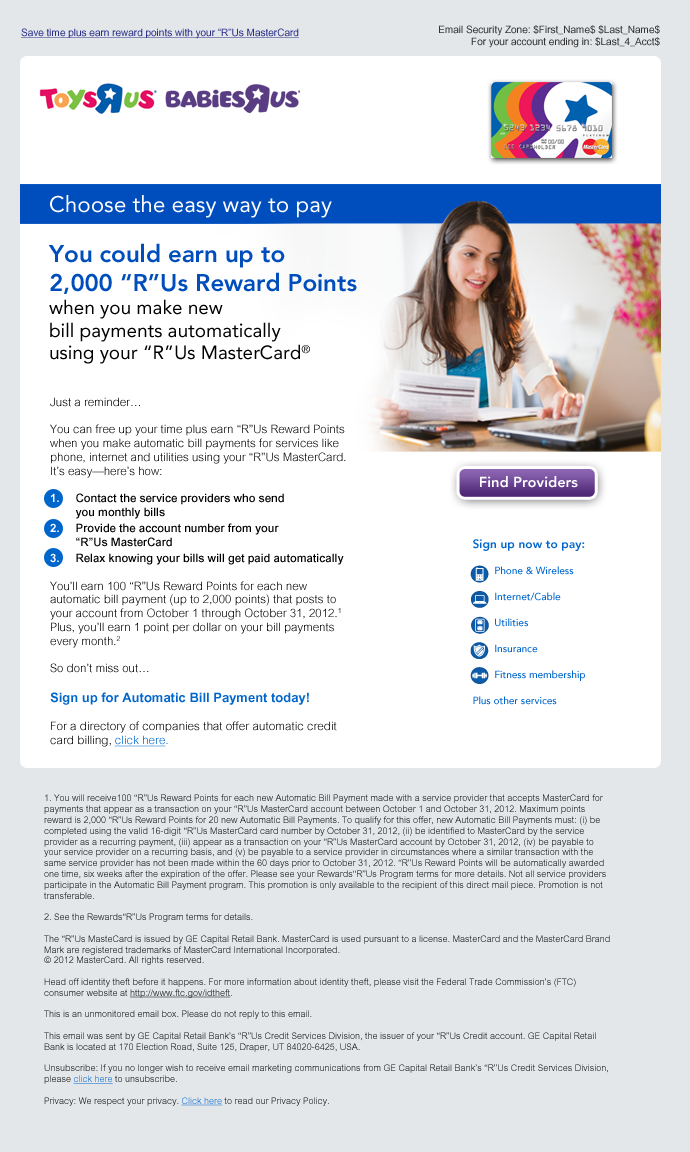
<style>
.page{position:relative;width:690px;height:1152px;background:#e4e7ea}
.page>*{position:absolute;margin:0}
.t1{font:10px "ArialMT";color:#2b3087;text-decoration:underline}
.t2{font:10px "ArialMT";color:#333333}
.t3{font:22.5px "Avenir-Roman";color:#ffffff}
.t4{font:19px "Avenir-Roman";color:#000000}
.t5{font:24px "Avenir-Heavy";color:#004ebc}
.t6{font:11.5px "ArialMT-Light";color:#000000}
.t7{font:11.5px "ArialMT-Bold";color:#ffffff}
.t8{font:11.5px "ArialMT-Medium";color:#000000}
.t9{font:11.5px/16px "ArialMT-Bold";color:#ffffff}
.t10{font:11.5px/16px "ArialMT-Medium";color:#000000}
.t11{font:13px "ArialMT-Bold";color:#0066cc}
.t12{font:11.7px "ArialMT-Light";color:#000000}
.t13{font:11.7px "ArialMT-Light";color:#0066cc;text-decoration:underline}
.t14{font:11.7px "ArialMT-Light";color:#0066cc}
.t15{font:14.6px "Avenir-Heavy";color:#ffffff}
.t16{font:10px/26px "Avenir-Medium";color:#0066cc}
.t17{font:12px/26px "Avenir-Heavy";color:#0066cc}
.t18{font:9px "ArialMT-Light"}
.t19{font:9px "ArialMT-Light";text-decoration:underline}
</style>
<div class="page">
<p class="t1" style="left:21px;top:28px;width:278px;height:11px">Save time plus earn reward points with your “R”Us MasterCard</p>
<p class="t2" style="left:439px;top:25px;width:221px;height:23px;text-align:right">Email Security Zone: $First_Name$ $Last_Name$<br>For your account ending in: $Last_4_Acct$</p>
<p class="t3" style="left:50px;top:195px;width:282px;height:23px">Choose the easy way to pay</p>
<p class="t4" style="left:48px;top:243px;width:309px;height:121px"><span class="t5">You could earn up to <br>2,000 “R”Us Reward Points <br></span>when you make new <br>bill payments automatically<br>using your “R”Us MasterCard®</p>
<p class="t6" style="left:50px;top:397px;width:296px;height:350px">Just a reminder…<br><br>You can free up your time plus earn “R”Us Reward Points when you make automatic bill payments for services like phone, internet and utilities using your “R”Us MasterCard. It’s easy—here’s how:<br><br><span class="t7">1.</span><span class="t8">     Contact the service providers who send <br>        you monthly bills<br></span><span class="t9">2.</span><span class="t10">     Provide the </span><span class="t8">account number from your <br>        “R”Us MasterCard<br></span><span class="t9">3.</span><span class="t10">     Relax knowing your bills will get paid automatically <br></span><br>You’ll earn 100 “R”Us Reward Points for each new <br>automatic bill payment (up to 2,000 points) that posts to your account from October 1 through October 31, 2012.1 <br>Plus, you’ll earn 1 point per dollar on your bill payments every month.2<br><br>So don’t miss out…<br><br><span class="t11">Sign up for Automatic Bill Payment today!<br></span><span class="t12"><br>For a directory of companies that offer automatic credit card billing, </span><span class="t13">click here</span><span class="t14">.</span></p>
<p class="t15" style="left:480px;top:476px;width:98px;height:12px">Find Providers</p>
<p class="t16" style="left:473px;top:539px;width:112px;height:166px"><span class="t17">Sign up now to pay:<br></span>Phone &amp; Wireless<br>Internet/Cable<br>Utilities<br>Insurance<br>Fitness membership<br>Plus other services</p>
<p class="t18" style="left:44px;top:794px;width:566px;height:312px">1. You will receive100 “R”Us Reward Points for each new Automatic Bill Payment made with a service provider that accepts MasterCard for payments that appear as a transaction on your “R”Us MasterCard account between October 1 and October 31, 2012. Maximum points reward is 2,000 “R”Us Reward Points for 20 new Automatic Bill Payments. To qualify for this offer, new Automatic Bill Payments must: (i) be completed using the valid 16-digit “R”Us MasterCard card number by October 31, 2012, (ii) be identified to MasterCard by the service provider as a recurring payment, (iii) appear as a transaction on your “R”Us MasterCard account by October 31, 2012, (iv) be payable to your service provider on a recurring basis, and (v) be payable to a service provider in circumstances where a similar transaction with the same service provider has not been made within the 60 days prior to October 31, 2012. “R”Us Reward Points will be automatically awarded one time, six weeks after the expiration of the offer. Please see your Rewards“R”Us Program terms for more details. Not all service providers participate in the Automatic Bill Payment program. This promotion is only available to the recipient of this direct mail piece. Promotion is not transferable.<br><br>2. See the Rewards“R”Us Program terms for details.<br><br>The “R”Us MasteCard is issued by GE Capital Retail Bank. MasterCard is used pursuant to a license. MasterCard and the MasterCard Brand Mark are registered trademarks of MasterCard International Incorporated.<br>© 2012 MasterCard. All rights reserved. <br><br>Head off identity theft before it happens. For more information about identity theft, please visit the Federal Trade Commission’s (FTC) consumer website at <span class="t19">http://www.ftc.gov/idtheft</span>.<br><br>This is an unmonitored email box. Please do not reply to this email.<br><br>This email was sent by GE Capital Retail Bank’s “R”Us Credit Services Division, the issuer of your “R”Us Credit account. GE Capital Retail Bank is located at 170 Election Road, Suite 125, Draper, UT 84020-6425, USA.<br><br>Unsubscribe: If you no longer wish to receive email marketing communications from GE Capital Retail Bank’s “R”Us Credit Services Division, please <span class="t19">click here</span> to unsubscribe.<br><br>Privacy: We respect your privacy. <span class="t19">Click here</span> to read our Privacy Policy.</p>
</div>
